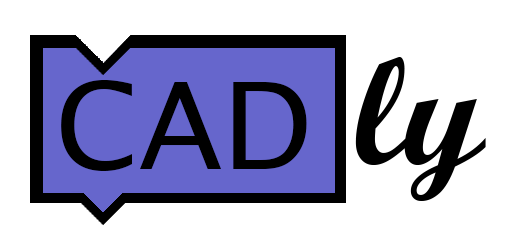
<style>
.page{position:relative;width:512px;height:250px;background:#ffffff}
.page>*{position:absolute;margin:0}
.t1{font:153px "ScriptMTBold";color:#000000}
.t2{font:121px "LucidaSansUnicode";color:#000000}
</style>
<div class="page">
<p class="t1" style="left:355px;top:57px;width:131px;height:144px">ly</p>
<p class="t2" style="left:61px;top:80px;width:246px;height:91px">CAD</p>
</div>
